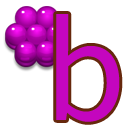
<style>
.page{position:relative;width:128px;height:128px;background:#ffffff}
.page>*{position:absolute;margin:0}
.t1{font:132.9px "SourceHanSansCN-Regular";color:#c406be}
</style>
<div class="page">
<p class="t1" style="left:56px;top:14px;width:64px;height:108px">b</p>
</div>
